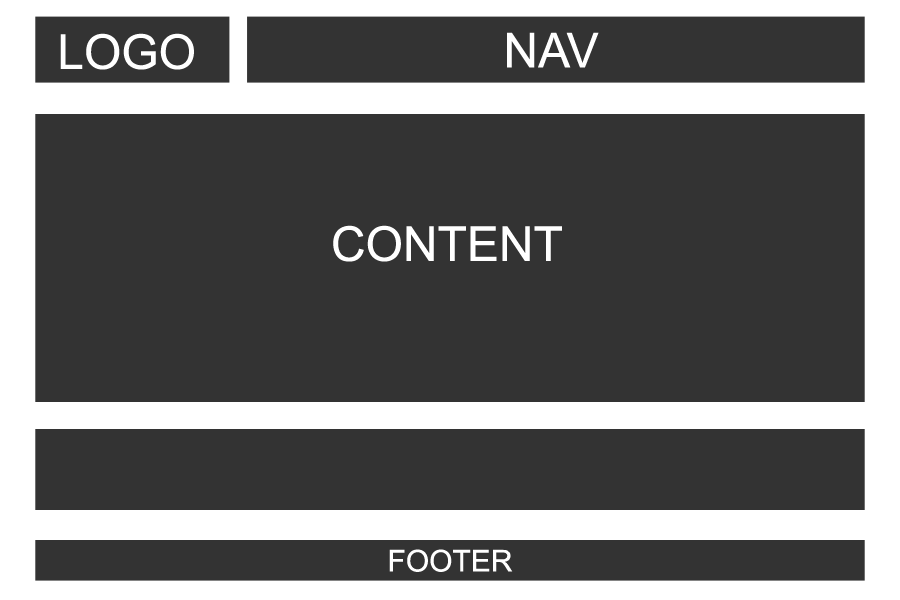
<style>
.page{position:relative;width:900px;height:600px;background:#333333}
.page>*{position:absolute;margin:0}
.t1{font:48px "ArialMT";color:#ffffff}
.t2{font:30px "ArialMT";color:#ffffff}
</style>
<div class="page">
<p class="t1" style="left:60px;top:33px;width:134px;height:37px">LOGO</p>
<p class="t1" style="left:507px;top:32px;width:92px;height:36px">NAV</p>
<p class="t1" style="left:333px;top:225px;width:229px;height:37px">CONTENT</p>
<p class="t2" style="left:389px;top:549px;width:124px;height:23px">FOOTER</p>
</div>
